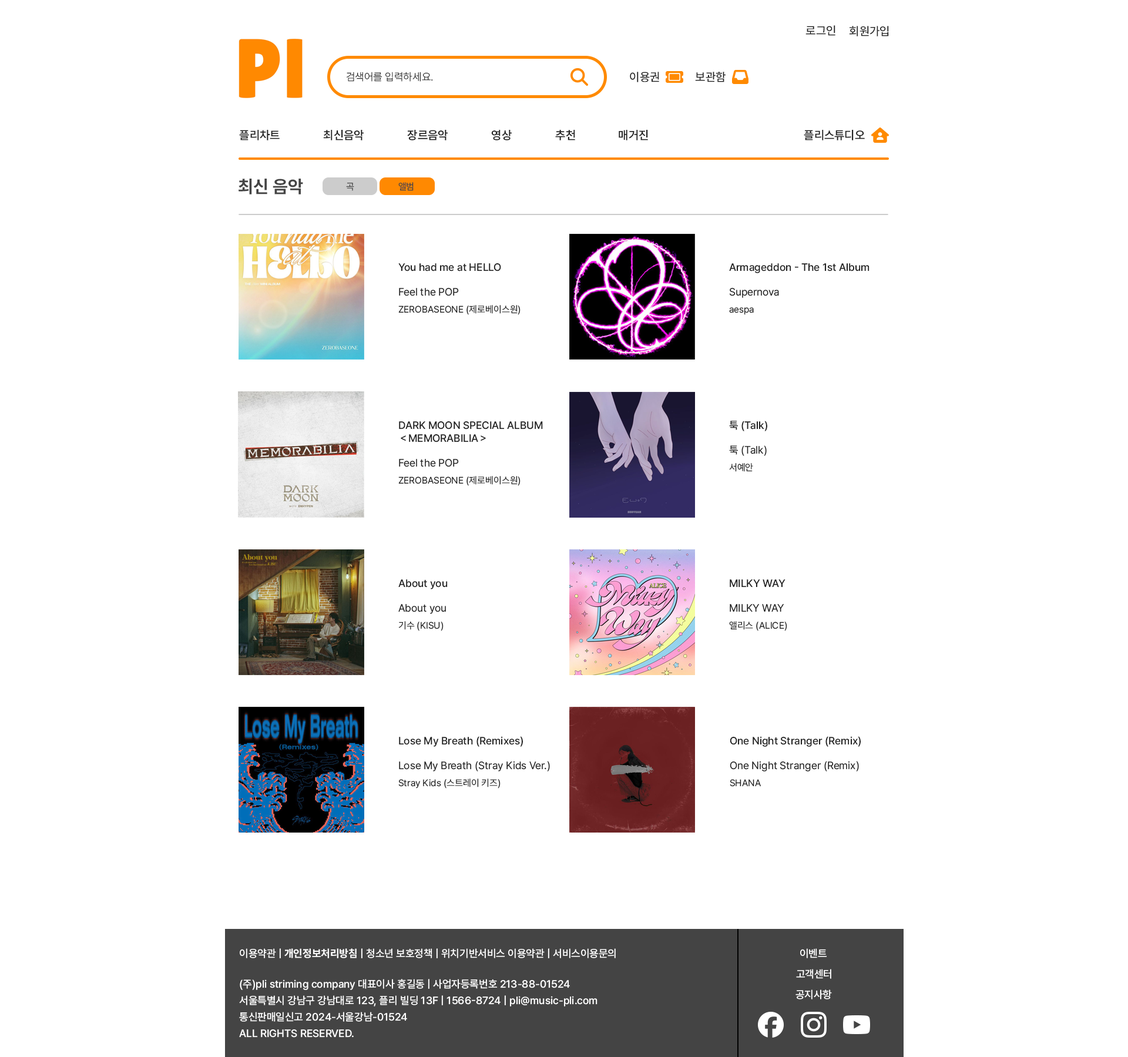
<style>
.page{position:relative;width:1128px;height:1057px;background:#ffffff}
.page>*{position:absolute;margin:0}
.t1{font:11.8px "Pretendard-Medium";color:#222222}
.t2{font:10.6px "Pretendard-Light";color:#222222}
.t3{font:11.8px "Pretendard-SemiBold";color:#222222}
.t4{font:17.6px "Pretendard-Bold";color:#444444}
.t5{font:9.4px "Pretendard-Regular";color:#444444}
.t6{font:10.6px "Pretendard-Medium";color:#222222}
.t7{font:10.6px "Pretendard-Regular";color:#222222}
.t8{font:9.4px "Pretendard-Regular";color:#222222}
.t9{font:10.6px "Pretendard-Medium";color:#ffffff}
.t10{font:10.6px "Pretendard-Bold";color:#ffffff}
.t11{font:10.6px/16.5px "Pretendard-Medium";color:#ffffff}
</style>
<div class="page">
<p class="t1" style="left:806px;top:25px;width:30px;height:11px">로그인</p>
<p class="t1" style="left:849px;top:26px;width:40px;height:10px">회원가입</p>
<p class="t2" style="left:346px;top:72px;width:87px;height:10px">검색어를 입력하세요.</p>
<p class="t1" style="left:630px;top:72px;width:29px;height:10px">이용권</p>
<p class="t1" style="left:695px;top:72px;width:31px;height:10px">보관함</p>
<p class="t3" style="left:239px;top:130px;width:41px;height:10px">플리차트</p>
<p class="t3" style="left:323px;top:130px;width:41px;height:10px">최신음악</p>
<p class="t3" style="left:407px;top:130px;width:41px;height:10px">장르음악</p>
<p class="t3" style="left:491px;top:130px;width:21px;height:10px">영상</p>
<p class="t3" style="left:555px;top:130px;width:20px;height:10px">추천</p>
<p class="t3" style="left:619px;top:130px;width:29px;height:10px">매거진</p>
<p class="t3" style="left:804px;top:130px;width:61px;height:10px">플리스튜디오</p>
<p class="t4" style="left:239px;top:179px;width:64px;height:15px">최신 음악</p>
<p class="t5" style="left:346px;top:183px;width:8px;height:8px">곡</p>
<p class="t5" style="left:398px;top:182px;width:16px;height:9px">앨범</p>
<p class="t6" style="left:398px;top:263px;width:103px;height:8px">You had me at HELLO</p>
<p class="t6" style="left:729px;top:263px;width:141px;height:10px">Armageddon - The 1st Album</p>
<p class="t7" style="left:399px;top:288px;width:60px;height:8px">Feel the POP</p>
<p class="t7" style="left:729px;top:288px;width:50px;height:10px">Supernova</p>
<p class="t8" style="left:398px;top:305px;width:123px;height:10px">ZEROBASEONE (제로베이스원)</p>
<p class="t8" style="left:729px;top:307px;width:25px;height:8px">aespa</p>
<p class="t6" style="left:399px;top:421px;width:144px;height:21px">DARK MOON SPECIAL ALBUM <br>＜MEMORABILIA＞</p>
<p class="t6" style="left:729px;top:421px;width:38px;height:10px">툭 (Talk)</p>
<p class="t7" style="left:729px;top:445px;width:38px;height:11px">툭 (Talk)</p>
<p class="t7" style="left:399px;top:459px;width:60px;height:8px">Feel the POP</p>
<p class="t8" style="left:729px;top:463px;width:24px;height:9px">서예안</p>
<p class="t8" style="left:398px;top:476px;width:123px;height:10px">ZEROBASEONE (제로베이스원)</p>
<p class="t6" style="left:398px;top:579px;width:50px;height:10px">About you</p>
<p class="t6" style="left:730px;top:579px;width:56px;height:9px">MILKY WAY</p>
<p class="t7" style="left:398px;top:604px;width:48px;height:10px">About you</p>
<p class="t7" style="left:730px;top:604px;width:54px;height:8px">MILKY WAY</p>
<p class="t8" style="left:398px;top:621px;width:46px;height:10px">기수 (KISU)</p>
<p class="t8" style="left:729px;top:621px;width:58px;height:10px">앨리스 (ALICE)</p>
<p class="t6" style="left:399px;top:736px;width:124px;height:11px">Lose My Breath (Remixes)</p>
<p class="t6" style="left:730px;top:736px;width:131px;height:11px">One Night Stranger (Remix)</p>
<p class="t7" style="left:399px;top:761px;width:151px;height:10px">Lose My Breath (Stray Kids Ver.)</p>
<p class="t7" style="left:730px;top:761px;width:129px;height:10px">One Night Stranger (Remix)</p>
<p class="t8" style="left:398px;top:779px;width:103px;height:10px">Stray Kids (스트레이 키즈)</p>
<p class="t8" style="left:730px;top:779px;width:31px;height:8px">SHANA</p>
<p class="t9" style="left:240px;top:948px;width:376px;height:10px">이용약관 | <span class="t10">개인정보처리방침</span> | 청소년 보호정책 | 위치기반서비스 이용약관 | 서비스이용문의</p>
<p class="t9" style="left:800px;top:948px;width:27px;height:10px">이벤트</p>
<p class="t9" style="left:796px;top:969px;width:35px;height:10px">고객센터</p>
<p class="t11" style="left:239px;top:979px;width:359px;height:59px">(주)pli striming company 대표이사 홍길동 | 사업자등록번호 213-88-01524<br>서울특별시 강남구 강남대로 123, 플리 빌딩 13F | 1566-8724 | pli@music-pli.com<br>통신판매일신고 2024-서울강남-01524      <br>ALL RIGHTS RESERVED.</p>
<p class="t9" style="left:796px;top:989px;width:36px;height:10px">공지사항</p>
</div>
